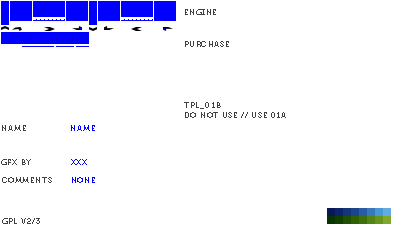
<style>
.page{position:relative;width:400px;height:230px;background:#ffffff}
.page>*{position:absolute;margin:0}
.t1{font:8px "Museo700-Regular";letter-spacing:0.075em;color:#404040;text-transform:uppercase}
.t2{font:8px "Museo700-Regular";letter-spacing:0.075em;color:#0000ff;text-transform:uppercase}
</style>
<div class="page">
<p class="t1" style="left:185px;top:9px;width:31px;height:6px">engine</p>
<p class="t1" style="left:185px;top:41px;width:44px;height:6px">purchase</p>
<p class="t1" style="left:184px;top:102px;width:102px;height:16px">tpl_01b<br>do not use // use 01a</p>
<p class="t1" style="left:2px;top:125px;width:24px;height:6px">name</p>
<p class="t2" style="left:71px;top:125px;width:24px;height:6px">name</p>
<p class="t1" style="left:1px;top:159px;width:30px;height:6px">gfx by</p>
<p class="t2" style="left:71px;top:159px;width:16px;height:6px">xxx</p>
<p class="t1" style="left:2px;top:177px;width:50px;height:6px">comments</p>
<p class="t2" style="left:72px;top:177px;width:23px;height:6px">none</p>
<p class="t1" style="left:2px;top:218px;width:38px;height:6px">gpl v2/3</p>
</div>
